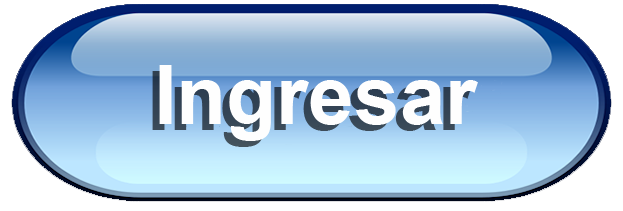
<style>
.page{position:relative;width:623px;height:211px}
.page>*{position:absolute;margin:0}
.t1{font:82px "Arial-BoldMT";color:#fefefe}
.t2{font:82px "Arial-BoldMT"}
</style>
<div class="page">
<p class="t1" style="left:159px;top:65px;width:319px;height:76px">Ingresar</p>
<p class="t2" style="left:152px;top:71px;width:319px;height:76px">Ingresar</p>
</div>
